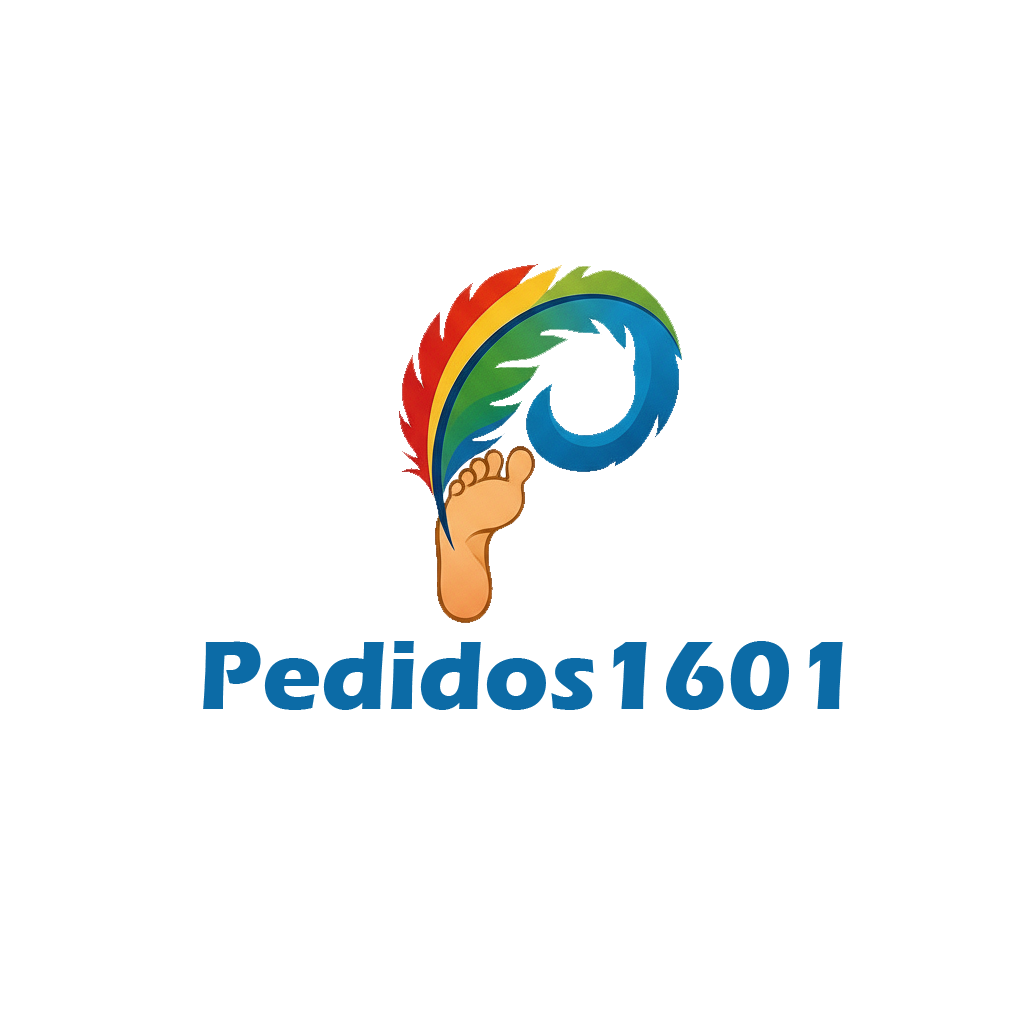
<style>
.page{position:relative;width:1024px;height:1024px;background:#ffffff}
.page>*{position:absolute;margin:0}
.t1{font:100px "ErasITC-Bold";color:#0c6ba6}
</style>
<div class="page">
<p class="t1" style="left:203px;top:641px;width:640px;height:69px">Pedidos1601</p>
</div>
